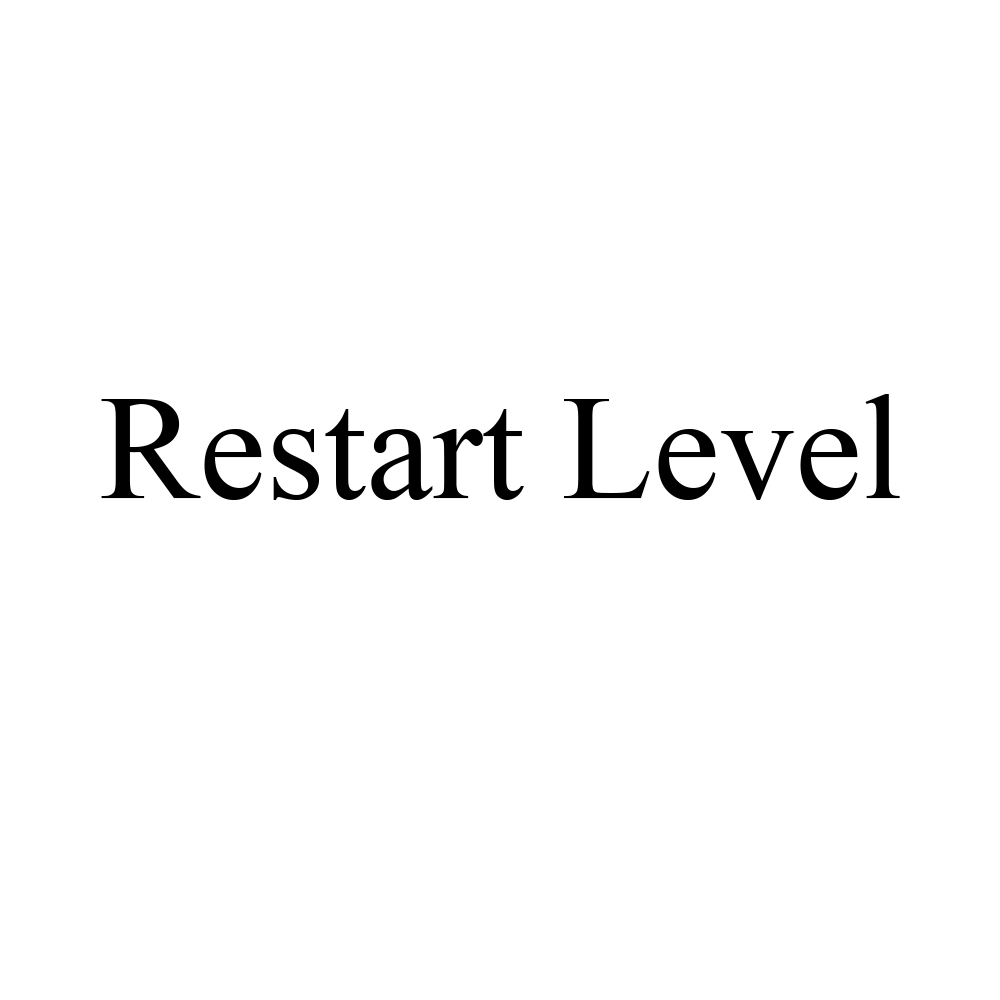
<style>
.page{position:relative;width:1000px;height:1000px;background:#ffffff}
.page>*{position:absolute;margin:0}
.t1{font:150px "TimesNewRomanPSMT";color:#000000}
</style>
<div class="page">
<p class="t1" style="left:101px;top:394px;width:799px;height:106px">Restart Level</p>
</div>
